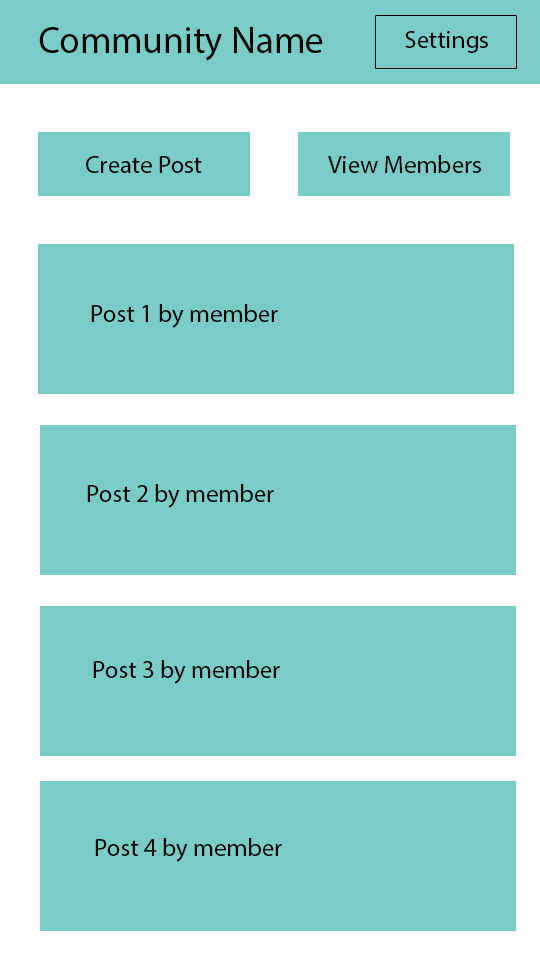
<style>
.page{position:relative;width:540px;height:960px;background:#7accc8}
.page>*{position:absolute;margin:0}
.t1{font:37.5px "MyriadPro-Regular";color:#000000}
.t2{font:25px "MyriadPro-Regular";color:#000000}
</style>
<div class="page">
<p class="t1" style="left:39px;top:27px;width:284px;height:34px">Community Name</p>
<p class="t2" style="left:405px;top:31px;width:83px;height:22px">Settings</p>
<p class="t2" style="left:86px;top:156px;width:116px;height:17px">Create Post</p>
<p class="t2" style="left:328px;top:155px;width:153px;height:18px">View Members</p>
<p class="t2" style="left:91px;top:304px;width:187px;height:24px">Post 1 by member</p>
<p class="t2" style="left:87px;top:484px;width:187px;height:24px">Post 2 by member</p>
<p class="t2" style="left:93px;top:660px;width:187px;height:24px">Post 3 by member</p>
<p class="t2" style="left:95px;top:838px;width:187px;height:24px">Post 4 by member</p>
</div>
